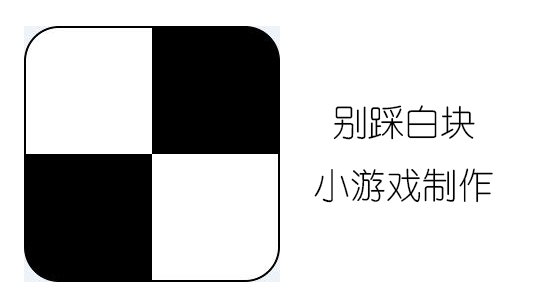
<style>
.page{position:relative;width:544px;height:306px;background:#ffffff}
.page>*{position:absolute;margin:0}
.t1{font:36px "YouYuan";color:#000000}
</style>
<div class="page">
<p class="t1" style="left:314px;top:105px;width:179px;height:98px;text-align:center">别踩白块<br>小游戏制作</p>
</div>
